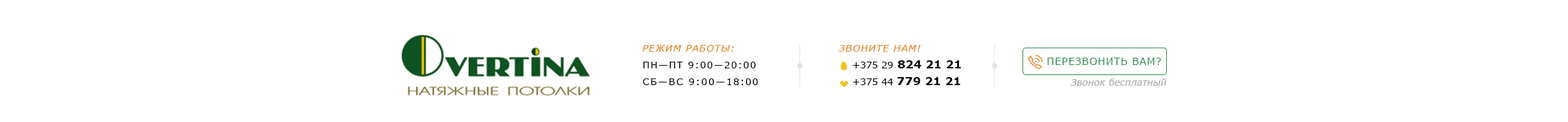
<style>
.page{position:relative;width:1568px;height:122px;background:#ffffff}
.page>*{position:absolute;margin:0}
.t1{font:9.4px/16.8px "Verdana";letter-spacing:0.1em;color:#000000;text-transform:uppercase}
.t2{font:9.4px/16.8px "Verdana-Italic";letter-spacing:0.075em;color:#e78724;text-transform:uppercase}
.t3{font:9.4px/16.8px "Verdana";letter-spacing:0.13em;color:#000000;text-transform:uppercase}
.t4{font:9.4px/10.7px "Verdana-Italic";letter-spacing:0.075em;color:#e78724;text-transform:uppercase}
.t5{font:9.4px/16.8px "Verdana";color:#000000}
.t6{font:11.4px/16.8px "Verdana-Bold";color:#000000}
.t7{font:10.1px "Verdana";letter-spacing:0.05em;color:#308d51;text-transform:uppercase}
.t8{font:9.4px "Verdana-Italic";color:#aaaaaa}
</style>
<div class="page">
<p class="t1" style="left:642px;top:45px;width:116px;height:40px"><span class="t2">режим работы:<br></span>Пн—Пт 9:00—20:00<br><span class="t3">Сб—Вс 9:00—</span>18:00</p>
<p class="t4" style="left:838px;top:45px;width:123px;height:40px">звоните нам!<br><span class="t5">+375 29 </span><span class="t6">824 21 21<br></span><span class="t5">+375 44 </span><span class="t6">779 21 21</span></p>
<p class="t7" style="left:1047px;top:58px;width:114px;height:7px">перезвонить вам?</p>
<p class="t8" style="left:1070px;top:79px;width:97px;height:7px">Звонок бесплатный</p>
</div>
